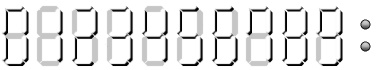
<style>
.page{position:relative;width:385px;height:70px;background:#ffffff}
.page>*{position:absolute;margin:0}
.t1{font:56.9px "HGPSoeiKakugothicUB"}
</style>
<div class="page">
<p class="t1" style="left:361px;top:20px;width:9px;height:31px">:</p>
</div>
